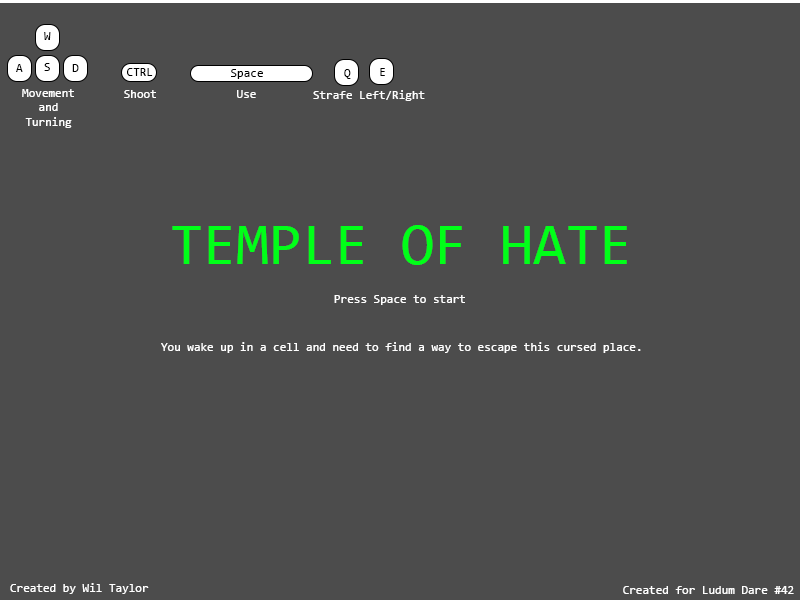
<style>
.page{position:relative;width:800px;height:600px;background:#4c4c4c}
.page>*{position:absolute;margin:0}
.t1{font:12px "Consolas";color:#000000}
.t2{font:12px "Consolas";color:#ffffff}
.t3{font:60px "Consolas";color:#00ff18}
</style>
<div class="page">
<p class="t1" style="left:44px;top:32px;width:7px;height:8px">W</p>
<p class="t1" style="left:16px;top:64px;width:7px;height:8px">A</p>
<p class="t1" style="left:44px;top:63px;width:6px;height:8px">S</p>
<p class="t1" style="left:72px;top:64px;width:7px;height:8px">D</p>
<p class="t1" style="left:127px;top:68px;width:26px;height:8px">CTRL</p>
<p class="t1" style="left:231px;top:69px;width:32px;height:10px">Space</p>
<p class="t1" style="left:344px;top:69px;width:7px;height:10px">Q</p>
<p class="t1" style="left:380px;top:68px;width:5px;height:8px">E</p>
<p class="t2" style="left:22px;top:89px;width:52px;height:39px;text-align:center">Movement<br> and <br>Turning</p>
<p class="t2" style="left:124px;top:90px;width:32px;height:8px">Shoot</p>
<p class="t2" style="left:237px;top:90px;width:19px;height:8px">Use</p>
<p class="t2" style="left:313px;top:90px;width:112px;height:11px">Strafe Left/Right</p>
<p class="t3" style="left:172px;top:225px;width:455px;height:40px">TEMPLE OF HATE</p>
<p class="t2" style="left:334px;top:295px;width:131px;height:10px">Press Space to start</p>
<p class="t2" style="left:161px;top:342px;width:480px;height:11px">You wake up in a cell and need to find a way to escape this cursed place.</p>
<p class="t2" style="left:10px;top:583px;width:139px;height:11px">Created by Wil Taylor</p>
<p class="t2" style="left:623px;top:586px;width:171px;height:8px">Created for Ludum Dare #42</p>
</div>
